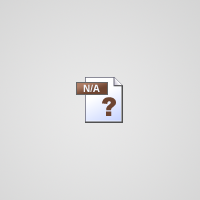
<style>
.page{position:relative;width:200px;height:200px}
.page>*{position:absolute;margin:0}
.t1{font:10px "Arial-BoldMT";color:#f2f8ff}
.t2{font:26px "Arial-Black";color:#6e4531}
</style>
<div class="page">
<p class="t1" style="left:83px;top:84px;width:17px;height:8px">N/A</p>
<p class="t2" style="left:102px;top:97px;width:14px;height:19px">?</p>
</div>
